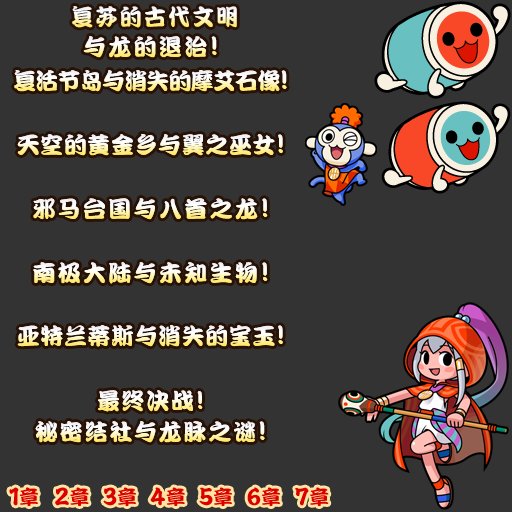
<style>
.page{position:relative;width:512px;height:512px;background:#333333}
.page>*{position:absolute;margin:0}
.t1{font:23px "DFPKanTingLiuW9";letter-spacing:0.1em;scale:0.96 1}
.t2{font:23px "DFPKanTingLiuW9";letter-spacing:0.1em}
.t3{font:27px "DFPKanTingLiuW9";letter-spacing:0.1em}
.t4{font:23px "DFPKanTingLiuW9";letter-spacing:-0.035em}
.t5{font:27px "DFPKanTingLiuW9";letter-spacing:-0.035em}
.t6{font:23px "DFPKanTingLiuW9";letter-spacing:0.025em}
.t7{font:27px "DFPKanTingLiuW9";letter-spacing:0.025em}
.t8{font:23px "DFPKanTingLiuW9";letter-spacing:0.075em}
.t9{font:26px "DFPKanTingLiuW9";letter-spacing:0.075em}
.t10{font:27px "DFPKanTingLiuW9";letter-spacing:0.075em}
</style>
<div class="page">
<p class="t1" style="left:72px;top:6px;width:165px;height:22px">复苏的古代文明</p>
<p class="t2" style="left:83px;top:36px;width:134px;height:22px">与龙的退治<span class="t3">!</span></p>
<p class="t4" style="left:14px;top:70px;width:273px;height:22px">复活节岛与消失的摩艾石像<span class="t5">!</span></p>
<p class="t6" style="left:17px;top:134px;width:266px;height:22px">天空的黄金乡与翼之巫女<span class="t7">!</span></p>
<p class="t2" style="left:33px;top:198px;width:235px;height:22px">邪马台国与八首之龙<span class="t3">!</span></p>
<p class="t2" style="left:33px;top:262px;width:235px;height:22px">南极大陆与未知生物<span class="t3">!</span></p>
<p class="t6" style="left:17px;top:325px;width:266px;height:22px">亚特兰蒂斯与消失的宝玉<span class="t7">!</span></p>
<p class="t8" style="left:98px;top:390px;width:105px;height:22px">最终决战<span class="t9">!</span></p>
<p class="t8" style="left:35px;top:421px;width:230px;height:22px">秘密结社与龙脉之谜<span class="t10">!</span></p>
</div>
